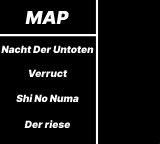
<style>
.page{position:relative;width:160px;height:144px;background:#000000}
.page>*{position:absolute;margin:0}
.t1{font:18px "InterUI-BlackItalic";color:#ffffff}
.t2{font:10px "InterUI-BlackItalic";color:#ffffff}
</style>
<div class="page">
<p class="t1" style="left:25px;top:10px;width:44px;height:14px">MAP</p>
<p class="t2" style="left:1px;top:45px;width:93px;height:9px">Nacht Der Untoten</p>
<p class="t2" style="left:28px;top:69px;width:40px;height:9px">Verruct</p>
<p class="t2" style="left:16px;top:94px;width:63px;height:9px">Shi No Numa</p>
<p class="t2" style="left:24px;top:120px;width:47px;height:9px">Der riese</p>
</div>
